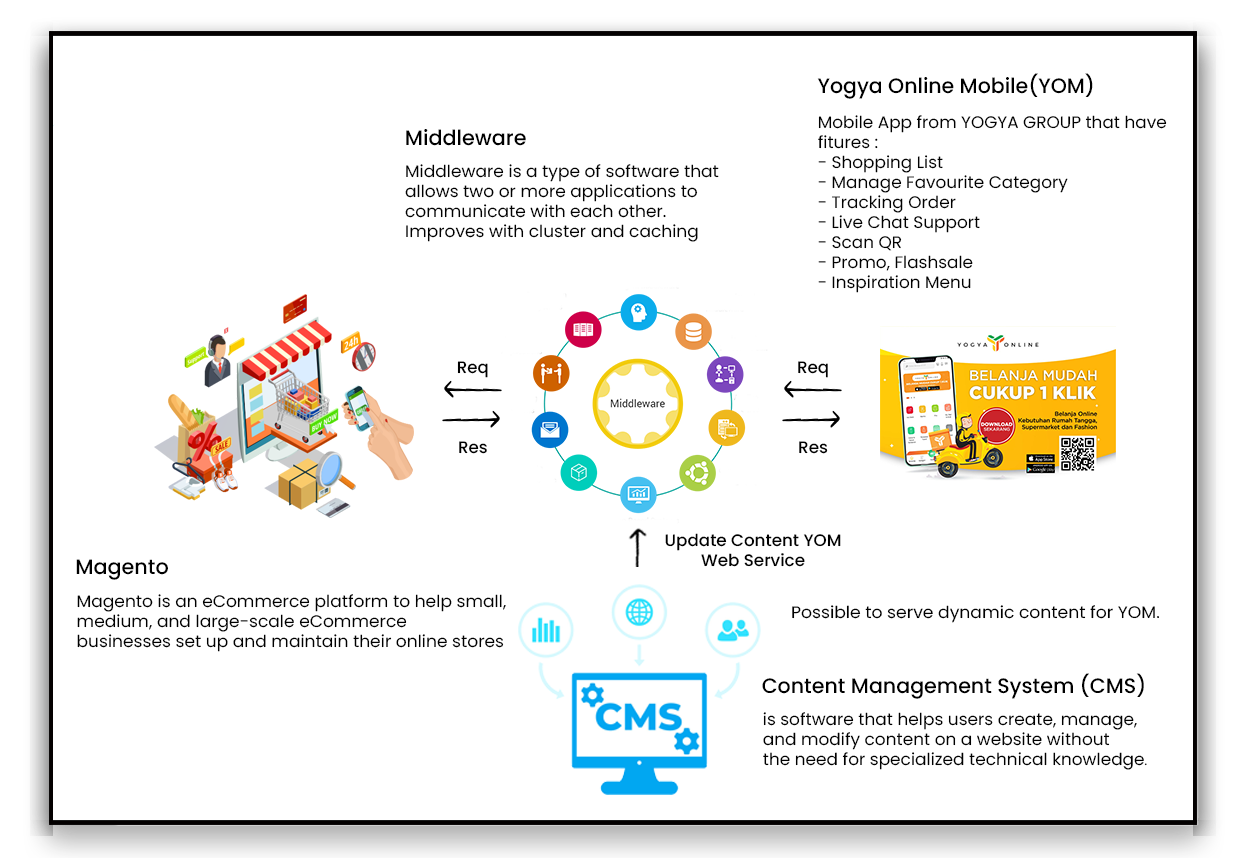
<style>
.page{position:relative;width:1248px;height:858px;background:#ffffff}
.page>*{position:absolute;margin:0}
.t1{font:20.8px "Poppins-Medium";color:#000000}
.t2{font:16.7px "Poppins-Regular";color:#000000}
.t3{font:16.7px "Poppins-Medium";color:#000000}
.t4{font:16.7px "Poppins-Regular";color:#000000;scale:1.03 1}
.t5{font:12.1px "Poppins-Regular";color:#000000}
</style>
<div class="page">
<p class="t1" style="left:817px;top:73px;width:276px;height:26px">Yogya Online Mobile(YOM)</p>
<p class="t2" style="left:818px;top:115px;width:349px;height:178px">Mobile App from YOGYA GROUP that have<br>fitures :<br>- Shopping List<br>- Manage Favourite Category<br>- Tracking Order<br>- Live Chat Support<br>- Scan QR<br>- Promo, Flashsale<br>- Inspiration Menu</p>
<p class="t1" style="left:406px;top:129px;width:120px;height:17px">Middleware</p>
<p class="t2" style="left:405px;top:164px;width:314px;height:78px">Middleware is a type of software that <br>allows two or more applications to <br>communicate with each other.<br>Improves with cluster and caching</p>
<p class="t3" style="left:457px;top:361px;width:31px;height:17px">Req</p>
<p class="t3" style="left:798px;top:361px;width:30px;height:17px">Req</p>
<p class="t3" style="left:459px;top:441px;width:28px;height:13px">Res</p>
<p class="t3" style="left:799px;top:441px;width:29px;height:13px">Res</p>
<p class="t3" style="left:665px;top:533px;width:176px;height:34px;text-align:center">Update Content YOM<br>Web Service</p>
<p class="t1" style="left:76px;top:559px;width:92px;height:21px">Magento</p>
<p class="t2" style="left:77px;top:594px;width:429px;height:58px">Magento is an eCommerce platform to help small, <br>medium, and large-scale eCommerce <br>businesses set up and maintain their online stores</p>
<p class="t4" style="left:792px;top:605px;width:367px;height:18px">Possible to serve dynamic content for YOM.</p>
<p class="t1" style="left:762px;top:673px;width:382px;height:26px">Content Management System (CMS)</p>
<p class="t2" style="left:763px;top:712px;width:384px;height:58px">is software that helps users create, manage, <br>and modify content on a website without <br>the need for specialized technical knowledge<span class="t5">.</span></p>
</div>
